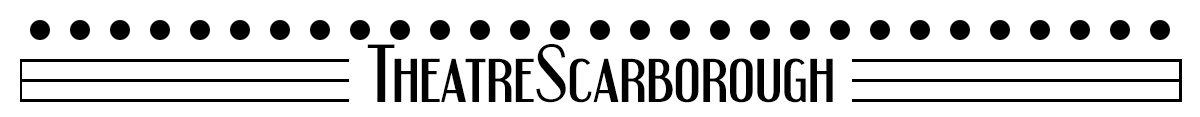
<style>
.page{position:relative;width:1200px;height:117px;background:#ffffff}
.page>*{position:absolute;margin:0}
.t1{font:72px "Engebrechtre";color:#010101}
</style>
<div class="page">
<p class="t1" style="left:367px;top:44px;width:466px;height:59px">TheatreScarborough</p>
</div>
